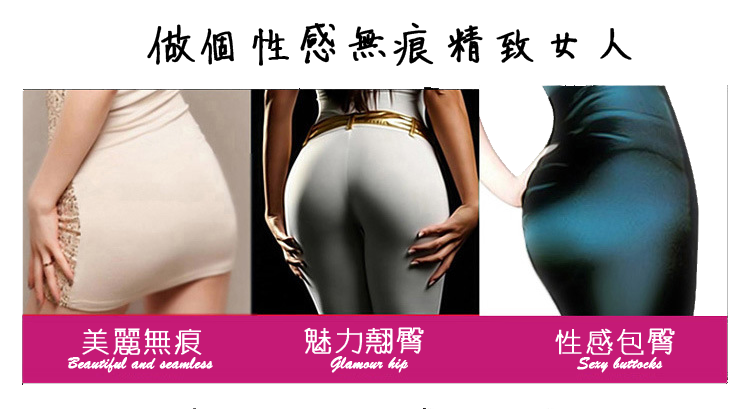
<style>
.page{position:relative;width:750px;height:409px;background:#ffffff}
.page>*{position:absolute;margin:0}
.t1{font:48px "beautiful-font";color:#000000;font-weight:bold}
.t2{font:30px "winman-tun33014";color:#ffffff;font-weight:bold}
.t3{font:18px "BrushScriptMT";color:#ffffff;font-weight:bold}
</style>
<div class="page">
<p class="t1" style="left:147px;top:22px;width:485px;height:44px">做個性感無痕精致女人</p>
<p class="t2" style="left:82px;top:328px;width:120px;height:27px">美麗無痕</p>
<p class="t2" style="left:304px;top:327px;width:120px;height:27px">魅力翹臀</p>
<p class="t2" style="left:555px;top:328px;width:120px;height:27px">性感包臀</p>
<p class="t3" style="left:67px;top:357px;width:146px;height:16px">Beautiful and seamless</p>
<p class="t3" style="left:330px;top:356px;width:78px;height:17px">Glamour hip</p>
<p class="t3" style="left:577px;top:357px;width:86px;height:16px">Sexy buttocks</p>
</div>
